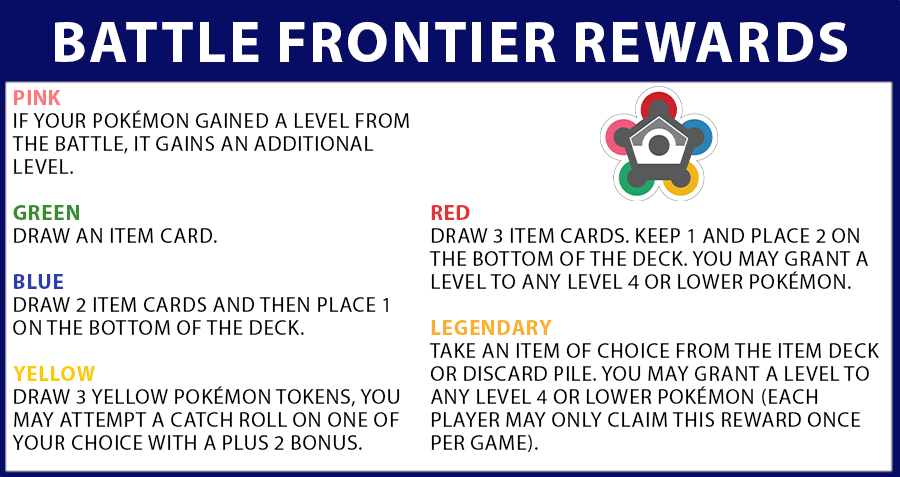
<style>
.page{position:relative;width:900px;height:477px;background:#ffffff}
.page>*{position:absolute;margin:0}
.t1{font:59px "MyriadPro-Bold";letter-spacing:0.02em;color:#ffffff;text-transform:uppercase}
.t2{font:21px/23px "MyriadPro-Regular";letter-spacing:0.02em;color:#010000;text-transform:uppercase}
.t3{font:21px/23px "MyriadPro-Bold";letter-spacing:0.02em;color:#fd787d;text-transform:uppercase}
.t4{font:21px/23px "MyriadPro-Bold";letter-spacing:0.02em;color:#378e2f;text-transform:uppercase}
.t5{font:21px/23px "MyriadPro-Bold";letter-spacing:0.02em;color:#2c3ea9;text-transform:uppercase}
.t6{font:21px/23px "MyriadPro-Bold";letter-spacing:0.02em;color:#fdca01;text-transform:uppercase}
.t7{font:21px/23px "MyriadPro-Bold";letter-spacing:0.02em;color:#e63233;text-transform:uppercase}
.t8{font:21px/23px "MyriadPro-Bold";letter-spacing:0.02em;color:#fab02e;text-transform:uppercase}
</style>
<div class="page">
<p class="t1" style="left:55px;top:22px;width:792px;height:40px">Battle frontier rewards</p>
<p class="t2" style="left:12px;top:90px;width:397px;height:360px"><span class="t3">PINK<br></span>If your Pokémon gained a level from the battle, it gains an additional level.<br><br><span class="t4">Green<br></span>Draw an item card.<br><br><span class="t5">Blue<br></span>draw 2 item cards and then place 1 on the bottom of the deck.<br><br><span class="t6">yellow<br></span>draw 3 yellow pokémon tokens, you may attempt a catch roll on one of your choice with a plus 2 bonus.</p>
<p class="t2" style="left:429px;top:205px;width:450px;height:247px"><span class="t7">red<br></span>draw 3 item cards. keep 1 and place 2 on the bottom of the deck. You may grant a level to any level 4 or lower pokémon.<br><br><span class="t8">legendary<br></span>take an item of choice from the item deck or discard pile. You may grant a level to any level 4 or lower pokémon (each player may only claim this reward once per game).</p>
</div>
